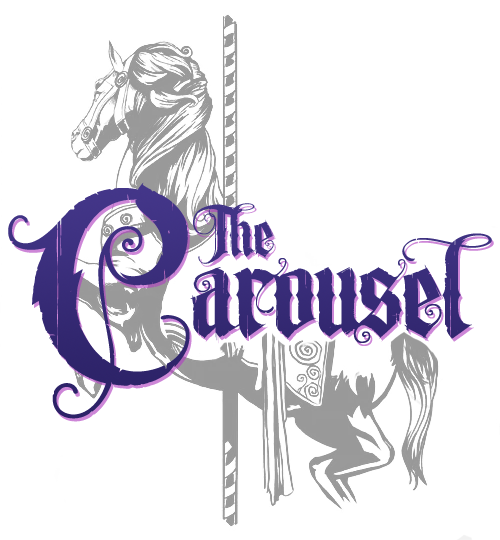
<style>
.page{position:relative;width:500px;height:540px;background:#ffffff}
.page>*{position:absolute;margin:0}
.t1{font:303.9px "LHFUnlovable1";color:#3a2e7b}
.t2{font:79.1px "LHFUnlovable1";color:#3f3283}
.t3{font:152.8px "LHFUnlovable1";color:#362b76}
</style>
<div class="page">
<p class="t1" style="left:8px;top:182px;width:182px;height:237px">C</p>
<p class="t2" style="left:193px;top:203px;width:81px;height:61px">The</p>
<p class="t3" style="left:190px;top:233px;width:302px;height:110px">arousel</p>
</div>
